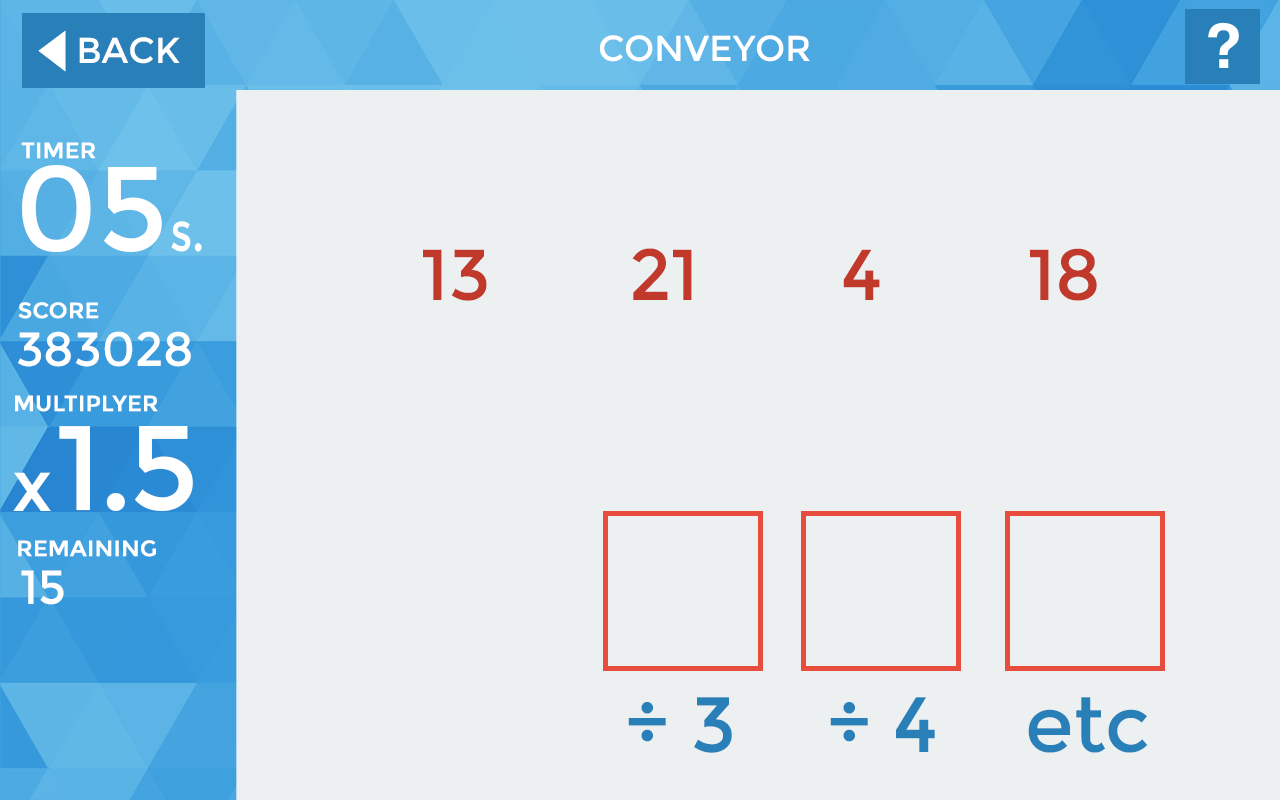
<style>
.page{position:relative;width:1280px;height:800px;background:#ecf0f1}
.page>*{position:absolute;margin:0}
.t1{font:36px "Montserrat-Regular";color:#ffffff}
.t2{font:36px "Montserrat-Regular";color:#ffffff;text-transform:uppercase}
.t3{font:22px "Montserrat-Regular";color:#ffffff;font-weight:bold}
.t4{font:120px "Montserrat-Regular";color:#ffffff}
.t5{font:55px "Montserrat-Regular";color:#ffffff;scale:0.8 1}
.t6{font:72px "Montserrat-Regular";color:#c0392b}
.t7{font:48px "Montserrat-Regular";color:#ffffff}
.t8{font:120px "Montserrat-Regular";letter-spacing:-0.025em;color:#ffffff}
.t9{font:72px "Montserrat-Regular";color:#ffffff}
.t10{font:78.3px "Montserrat-Regular";color:#2980b9}
</style>
<div class="page">
<p class="t1" style="left:79px;top:37px;width:101px;height:27px">BACK</p>
<p class="t2" style="left:599px;top:35px;width:211px;height:27px">CONVEYOR</p>
<p class="t3" style="left:21px;top:142px;width:75px;height:17px">TIMER</p>
<p class="t4" style="left:22px;top:165px;width:140px;height:87px">05</p>
<p class="t5" style="left:171px;top:221px;width:31px;height:31px">s.</p>
<p class="t6" style="left:423px;top:249px;width:64px;height:52px">13</p>
<p class="t6" style="left:632px;top:248px;width:60px;height:52px">21</p>
<p class="t6" style="left:843px;top:249px;width:37px;height:51px">4</p>
<p class="t6" style="left:1030px;top:248px;width:67px;height:53px">18</p>
<p class="t3" style="left:18px;top:302px;width:81px;height:17px">SCORE</p>
<p class="t7" style="left:17px;top:331px;width:174px;height:36px">383028</p>
<p class="t3" style="left:15px;top:395px;width:143px;height:17px">MULTIPLYER</p>
<p class="t8" style="left:59px;top:426px;width:134px;height:85px">1.5</p>
<p class="t9" style="left:13px;top:472px;width:38px;height:39px">x</p>
<p class="t3" style="left:18px;top:540px;width:138px;height:17px">REMAINING</p>
<p class="t7" style="left:21px;top:570px;width:43px;height:35px">15</p>
<p class="t10" style="left:628px;top:697px;width:104px;height:56px">÷ 3</p>
<p class="t10" style="left:830px;top:697px;width:105px;height:55px">÷ 4</p>
<p class="t10" style="left:1028px;top:697px;width:120px;height:56px">etc</p>
</div>
